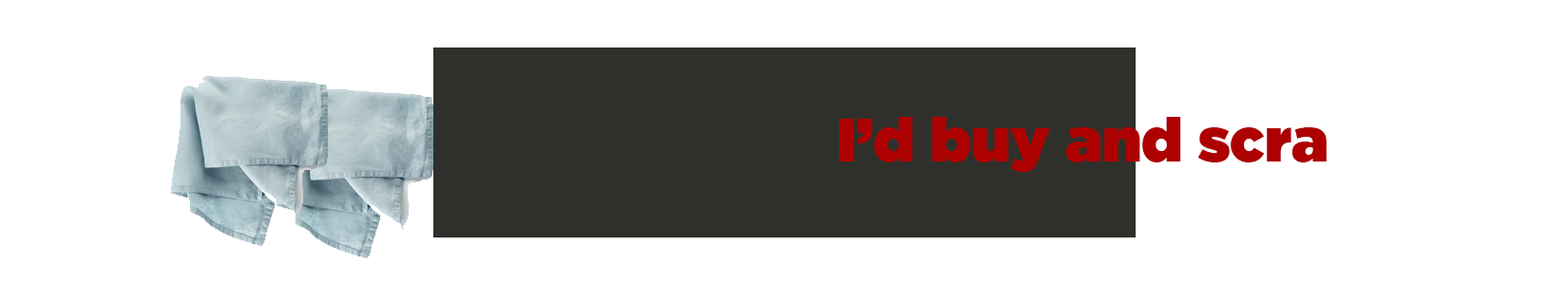
<style>
.page{position:relative;width:1568px;height:285px;background:#ffffff}
.page>*{position:absolute;margin:0}
.t1{font:60.8px "GothamUltra";color:#ad0101}
</style>
<div class="page">
<p class="t1" style="left:839px;top:117px;width:488px;height:55px">I’d buy and scra</p>
</div>
